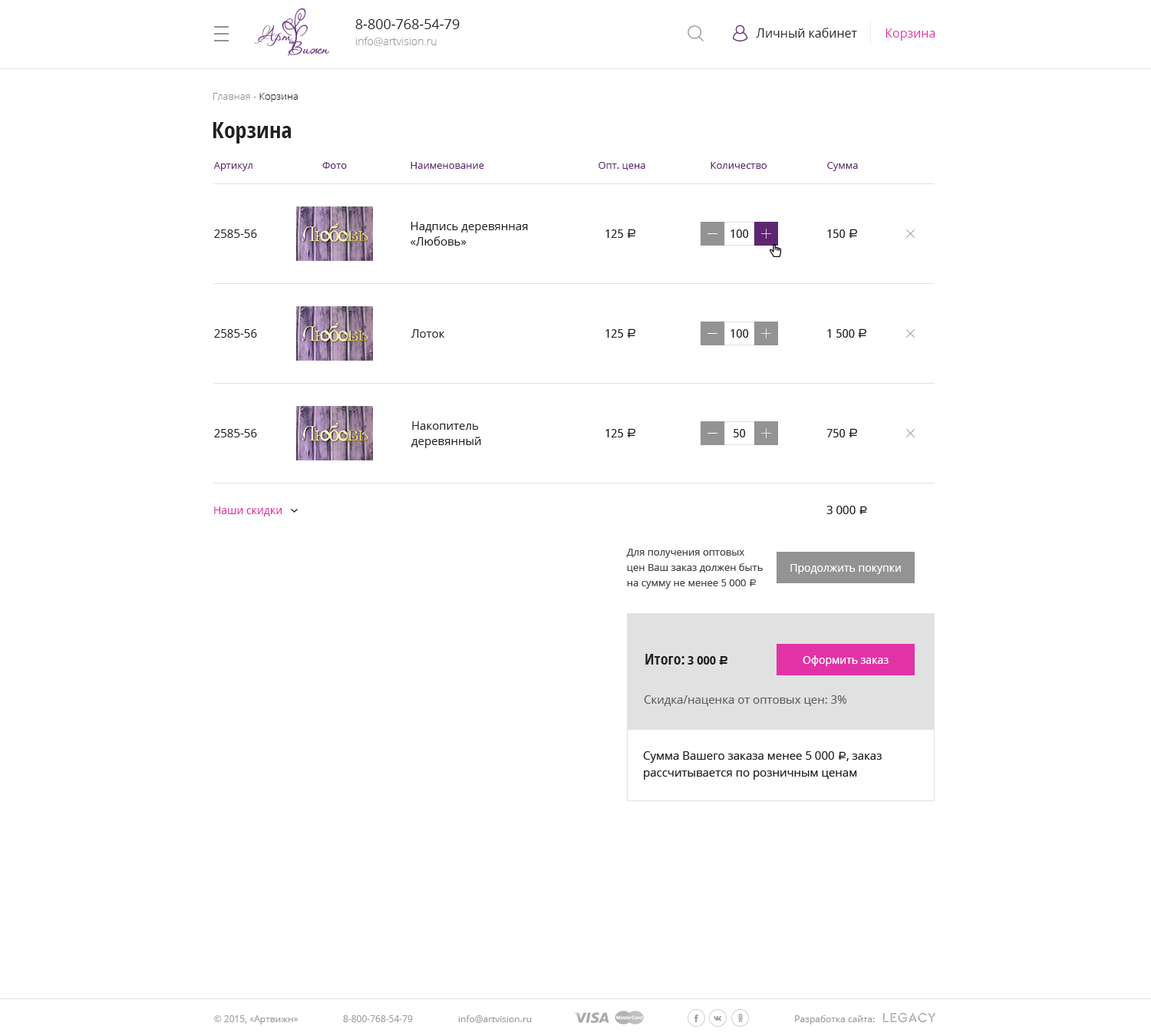
<style>
.page{position:relative;width:1151px;height:1036px;background:#ffffff}
.page>*{position:absolute;margin:0}
.t1{font:13.8px "OpenSans";color:#202020}
.t2{font:12.3px "OpenSans";color:#202020}
.t3{font:12.3px "OpenSans";color:#e233a6}
.t4{font:10.7px "OpenSans-Light";color:#999999}
.t5{font:10px "OpenSans-Light";color:#939393}
.t6{font:10px "OpenSans-Light";color:#202020}
.t7{font:23px "OpenSans-CondensedBold";color:#202020}
.t8{font:10px "OpenSans";color:#5e2670}
.t9{font:11.5px/15.3px "OpenSans";color:#202020}
.t10{font:11.5px "OpenSans";color:#202020}
.t11{font:11.5px "DroidSans";color:#202020}
.t12{font:12.3px "ALSRubl";color:#202020}
.t13{font:10.7px "OpenSans";color:#e233a6}
.t14{font:11.5px "ALSRubl";color:#202020}
.t15{font:10px/15.3px "OpenSans";color:#444444}
.t16{font:10px/15.3px "ALSRubl";color:#444444}
.t17{font:10.7px "OpenSans";color:#ffffff}
.t18{font:15.3px "OpenSans-CondensedBold";color:#202020}
.t19{font:11.5px "DroidSans-Bold";color:#1f1f1f}
.t20{font:12.3px "ALSRubl";color:#1f1f1f}
.t21{font:11.5px "OpenSans";color:#5d5d5d}
.t22{font:11.5px/16.9px "OpenSans";color:#202020}
.t23{font:11.5px/16.9px "ALSRubl";color:#202020}
.t24{font:9.2px "OpenSans";color:#9e9d9d}
</style>
<div class="page">
<p class="t1" style="left:355px;top:19px;width:105px;height:10px">8-800-768-54-79</p>
<p class="t2" style="left:756px;top:28px;width:101px;height:10px">Личный кабинет</p>
<p class="t3" style="left:886px;top:28px;width:49px;height:13px">Корзина</p>
<p class="t4" style="left:356px;top:37px;width:81px;height:9px">info@artvision.ru</p>
<p class="t5" style="left:213px;top:93px;width:85px;height:9px">Главная - <span class="t6">Корзина</span></p>
<p class="t7" style="left:213px;top:122px;width:78px;height:21px">Корзина</p>
<p class="t8" style="left:213px;top:162px;width:39px;height:9px">Артикул</p>
<p class="t8" style="left:322px;top:162px;width:25px;height:7px">Фото</p>
<p class="t8" style="left:411px;top:162px;width:73px;height:7px">Наименование</p>
<p class="t8" style="left:599px;top:162px;width:46px;height:8px">Опт. цена</p>
<p class="t8" style="left:711px;top:162px;width:56px;height:7px">Количество</p>
<p class="t8" style="left:827px;top:162px;width:31px;height:9px">Сумма</p>
<p class="t9" style="left:411px;top:222px;width:117px;height:24px">Надпись деревянная <br>«Любовь»</p>
<p class="t10" style="left:214px;top:229px;width:43px;height:9px">2585-56</p>
<p class="t11" style="left:605px;top:229px;width:30px;height:9px">125 <span class="t12">a</span></p>
<p class="t11" style="left:731px;top:229px;width:18px;height:9px">100</p>
<p class="t11" style="left:827px;top:229px;width:30px;height:9px">150 <span class="t12">a</span></p>
<p class="t10" style="left:214px;top:329px;width:43px;height:9px">2585-56</p>
<p class="t10" style="left:411px;top:329px;width:34px;height:9px">Лоток</p>
<p class="t11" style="left:605px;top:328px;width:30px;height:10px">125 <span class="t12">a</span></p>
<p class="t11" style="left:731px;top:329px;width:18px;height:9px">100</p>
<p class="t11" style="left:827px;top:328px;width:39px;height:10px">1 500 <span class="t12">a</span></p>
<p class="t9" style="left:411px;top:421px;width:70px;height:27px">Накопитель<br>деревянный</p>
<p class="t10" style="left:214px;top:429px;width:43px;height:8px">2585-56</p>
<p class="t11" style="left:605px;top:428px;width:30px;height:9px">125 <span class="t12">a</span></p>
<p class="t11" style="left:734px;top:429px;width:12px;height:8px">50</p>
<p class="t11" style="left:826px;top:428px;width:31px;height:9px">750 <span class="t12">a</span></p>
<p class="t13" style="left:214px;top:506px;width:68px;height:10px">Наши скидки</p>
<p class="t10" style="left:826px;top:506px;width:41px;height:8px">3 000 <span class="t14">a</span></p>
<p class="t15" style="left:626px;top:549px;width:137px;height:40px">Для получения оптовых <br>цен Ваш заказ должен быть <br>на сумму не менее 5 000 <span class="t16">a</span></p>
<p class="t17" style="left:790px;top:564px;width:111px;height:10px">Продолжить покупки</p>
<p class="t18" style="left:645px;top:654px;width:39px;height:11px">Итого:</p>
<p class="t19" style="left:688px;top:656px;width:39px;height:9px">3 000 <span class="t20">c</span></p>
<p class="t17" style="left:803px;top:655px;width:86px;height:11px">Оформить заказ</p>
<p class="t21" style="left:644px;top:695px;width:202px;height:11px">Скидка/наценка от оптовых цен: 3%</p>
<p class="t22" style="left:643px;top:751px;width:239px;height:29px">Сумма Вашего заказа менее 5 000 <span class="t23">a</span>, заказ <br>рассчитывается по розничным ценам</p>
<p class="t24" style="left:214px;top:1015px;width:85px;height:9px">© 2015, «Артвижн»</p>
<p class="t24" style="left:343px;top:1015px;width:70px;height:7px">8-800-768-54-79</p>
<p class="t24" style="left:458px;top:1015px;width:74px;height:8px">info@artvision.ru</p>
<p class="t24" style="left:795px;top:1015px;width:80px;height:9px">Разработка сайта:</p>
</div>
